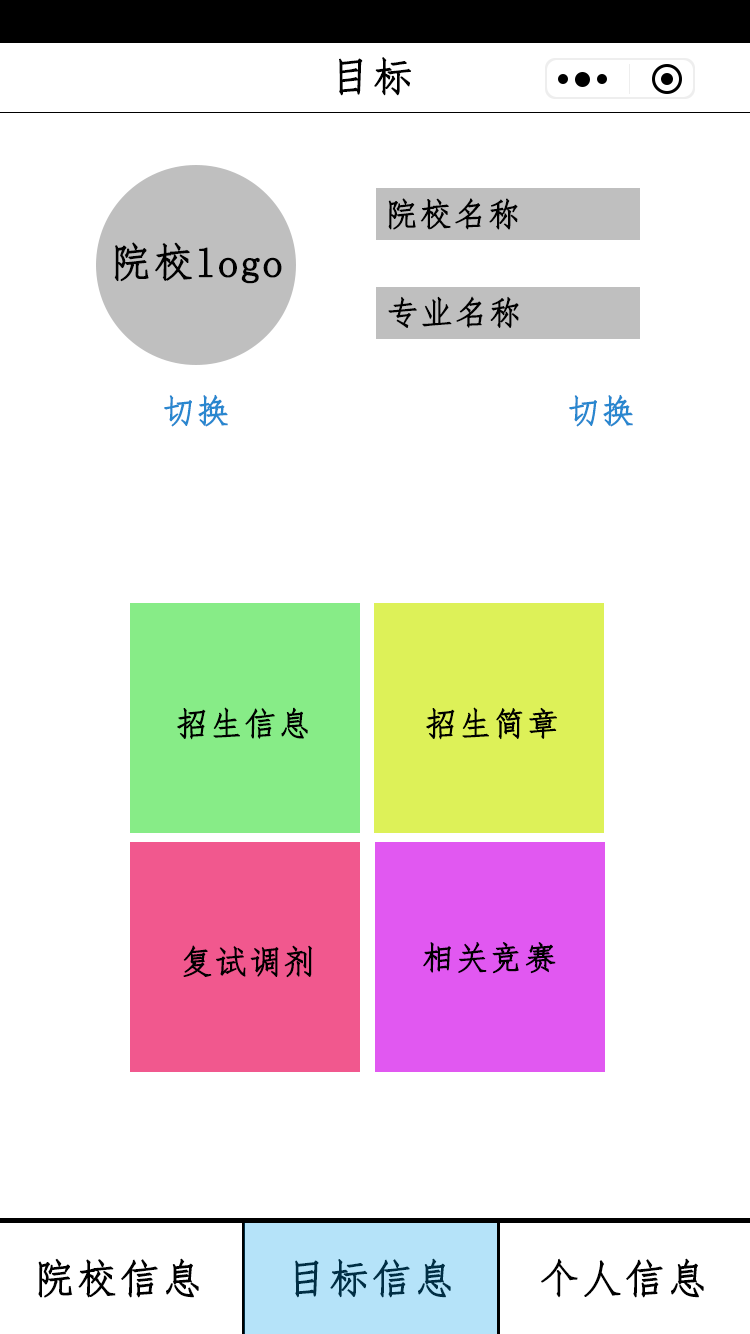
<style>
.page{position:relative;width:750px;height:1334px;background:#ffffff}
.page>*{position:absolute;margin:0}
.t1{font:40.7px "FangSong";letter-spacing:0.02em;color:#000000;font-weight:bold}
.t2{font:32.7px "FangSong";letter-spacing:0.02em;color:#000000;font-weight:bold}
.t3{font:32.7px "FangSong";letter-spacing:0.02em;color:#2987cf;font-weight:bold}
.t4{font:40.7px "FangSong";letter-spacing:0.02em;color:#002e44;font-weight:bold}
</style>
<div class="page">
<p class="t1" style="left:339px;top:57px;width:73px;height:39px">目标</p>
<p class="t2" style="left:388px;top:198px;width:130px;height:32px">院校名称</p>
<p class="t1" style="left:114px;top:242px;width:168px;height:42px">院校logo</p>
<p class="t2" style="left:388px;top:296px;width:131px;height:32px">专业名称</p>
<p class="t3" style="left:164px;top:394px;width:64px;height:33px">切换</p>
<p class="t3" style="left:569px;top:394px;width:64px;height:33px">切换</p>
<p class="t2" style="left:177px;top:707px;width:131px;height:33px">招生信息</p>
<p class="t2" style="left:426px;top:707px;width:131px;height:33px">招生简章</p>
<p class="t2" style="left:423px;top:942px;width:133px;height:32px">相关竞赛</p>
<p class="t2" style="left:183px;top:945px;width:129px;height:33px">复试调剂</p>
<p class="t1" style="left:38px;top:1258px;width:161px;height:40px">院校信息</p>
<p class="t4" style="left:295px;top:1258px;width:156px;height:40px">目标信息</p>
<p class="t1" style="left:541px;top:1258px;width:163px;height:40px">个人信息</p>
</div>
